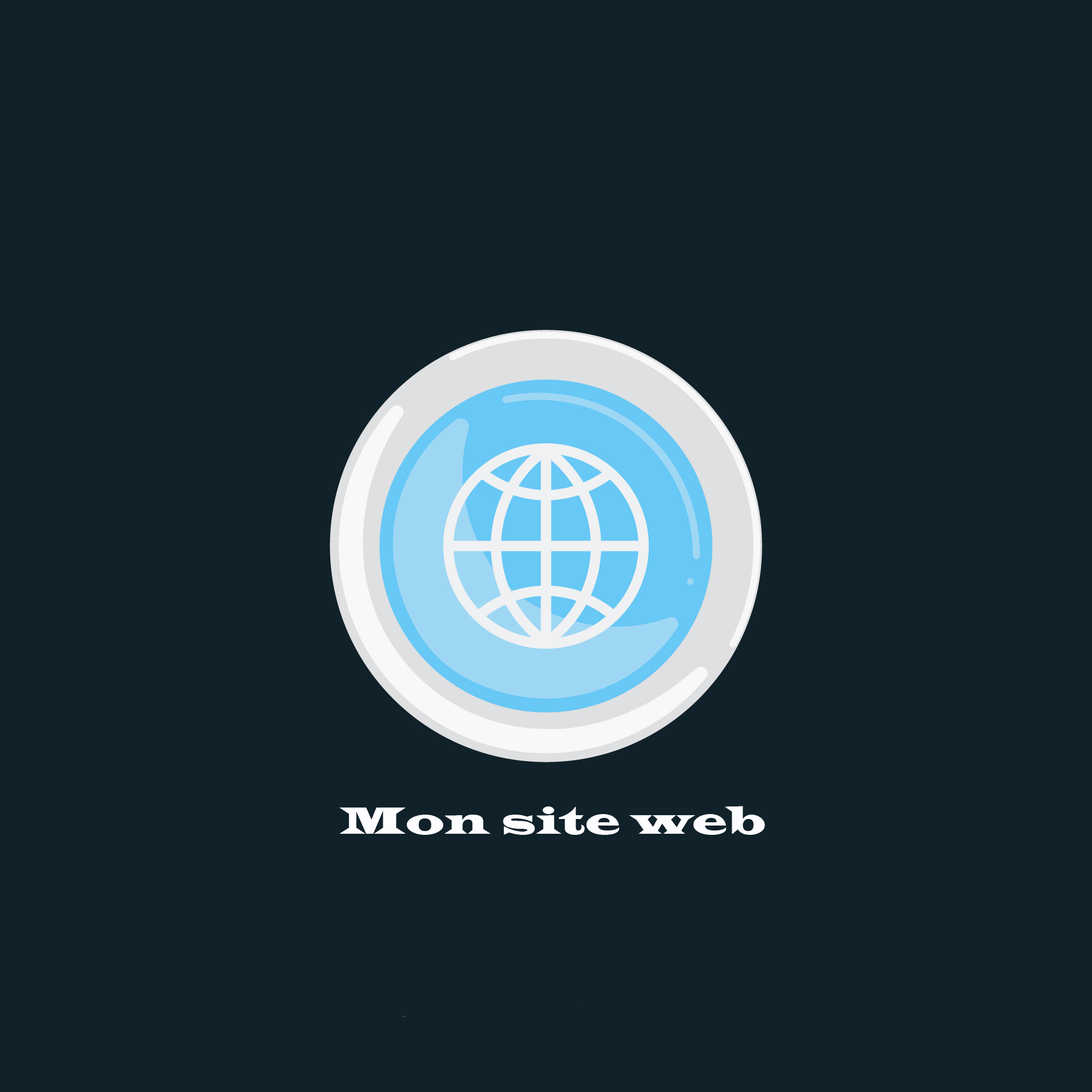
<style>
.page{position:relative;width:1092px;height:1092px;background:#102129}
.page>*{position:absolute;margin:0}
.t1{font:39.3px "LatinWide";color:#fdfdff}
</style>
<div class="page">
<p class="t1" style="left:339px;top:806px;width:426px;height:29px">Mon site web</p>
</div>
